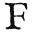
<style>
.page{position:relative;width:32px;height:32px;background:#ffffff}
.page>*{position:absolute;margin:0}
.t1{font:38px "IM_FELL_English_SC";color:#111111}
</style>
<div class="page">
<p class="t1" style="left:4px;top:2px;width:24px;height:28px">F</p>
</div>
